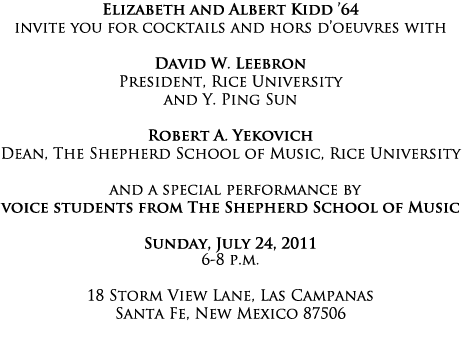
<style>
.page{position:relative;width:462px;height:352px;background:#ffffff}
.page>*{position:absolute;margin:0}
.t1{font:15px "TrajanPro-Regular";color:#000000}
.t2{font:15px "TrajanPro-Bold";color:#000000}
.t3{font:15px/16px "TrajanPro-Regular";color:#000000}
</style>
<div class="page">
<p class="t1" style="left:0px;top:2px;width:462px;height:319px;text-align:center"><span class="t2">Elizabeth and Albert Kidd ’64 <br></span>invite you for cocktails and hors d’oeuvres with  <br><span class="t2"><br>David W. Leebron <br></span>President, Rice University <br>and Y. Ping Sun  <br><span class="t2"><br>Robert A. Yekovich <br></span>Dean, The Shepherd School of Music, Rice University<br><br>  and a special performance by <br><span class="t2">voice students from The Shepherd School of Music  <br><br>Sunday, July 24, 2011 <br></span><span class="t3">6-8 p.m.  <br></span><br>18 Storm View Lane, Las Campanas <br>Santa Fe, New Mexico 87506</p>
</div>
